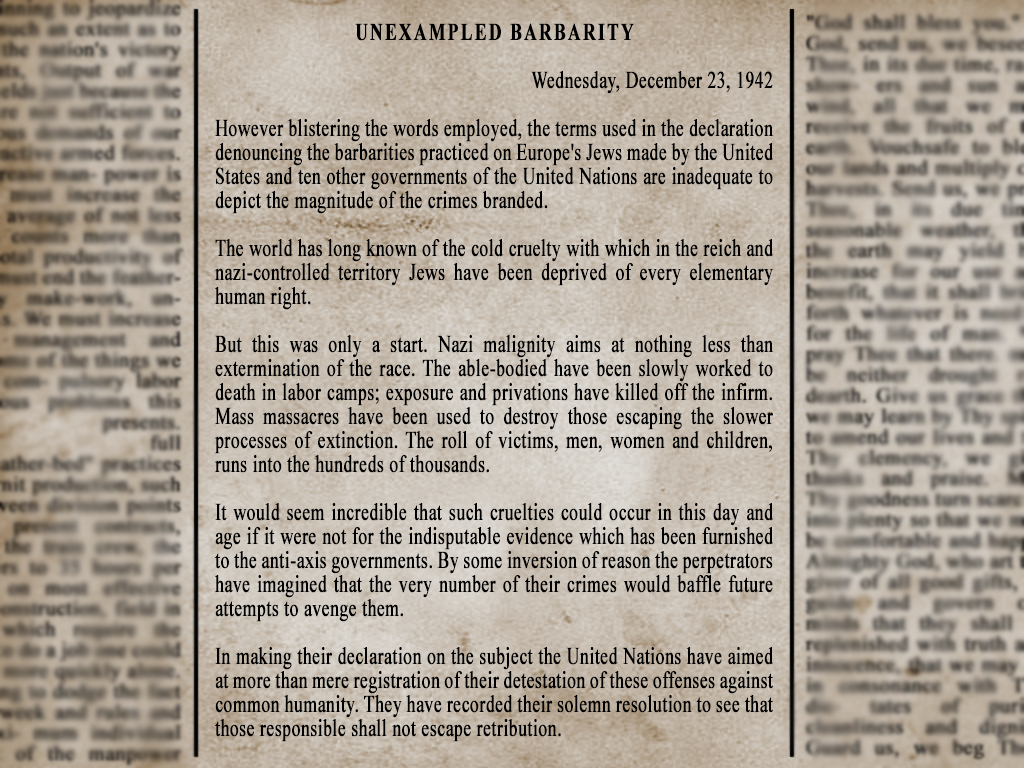
<style>
.page{position:relative;width:1024px;height:768px}
.page>*{position:absolute;margin:0}
.t1{font:24px/24px "TimesNewRomanPSMT";letter-spacing:0.005em;color:#000000;font-weight:bold;scale:0.73 1}
.t2{font:24px/24px "TimesNewRomanPS-BoldMT";letter-spacing:0.1em;color:#000000;font-weight:bold;scale:0.73 1}
</style>
<div class="page">
<p class="t1" style="left:214px;top:23px;width:560px;height:719px;text-align:justify"><span class="t2">UNEXAMPLED BARBARITY<br></span><br>Wednesday, December 23, 1942<br><br>However blistering the words employed, the terms used in the declaration denouncing the barbarities practiced on Europe's Jews made by the United States and ten other governments of the United Nations are inadequate to depict the magnitude of the crimes branded.<br><br>The world has long known of the cold cruelty with which in the reich and nazi-controlled territory Jews have been deprived of every elementary human right.<br><br>But this was only a start. Nazi malignity aims at nothing less than extermination of the race. The able-bodied have been slowly worked to death in labor camps; exposure and privations have killed off the infirm. Mass massacres have been used to destroy those escaping the slower processes of extinction. The roll of victims, men, women and children, runs into the hundreds of thousands.<br><br>It would seem incredible that such cruelties could occur in this day and age if it were not for the indisputable evidence which has been furnished to the anti-axis governments. By some inversion of reason the perpetrators have imagined that the very number of their crimes would baffle future attempts to avenge them.<br><br>In making their declaration on the subject the United Nations have aimed at more than mere registration of their detestation of these offenses against common humanity. They have recorded their solemn resolution to see that those responsible shall not escape retribution.</p>
</div>
